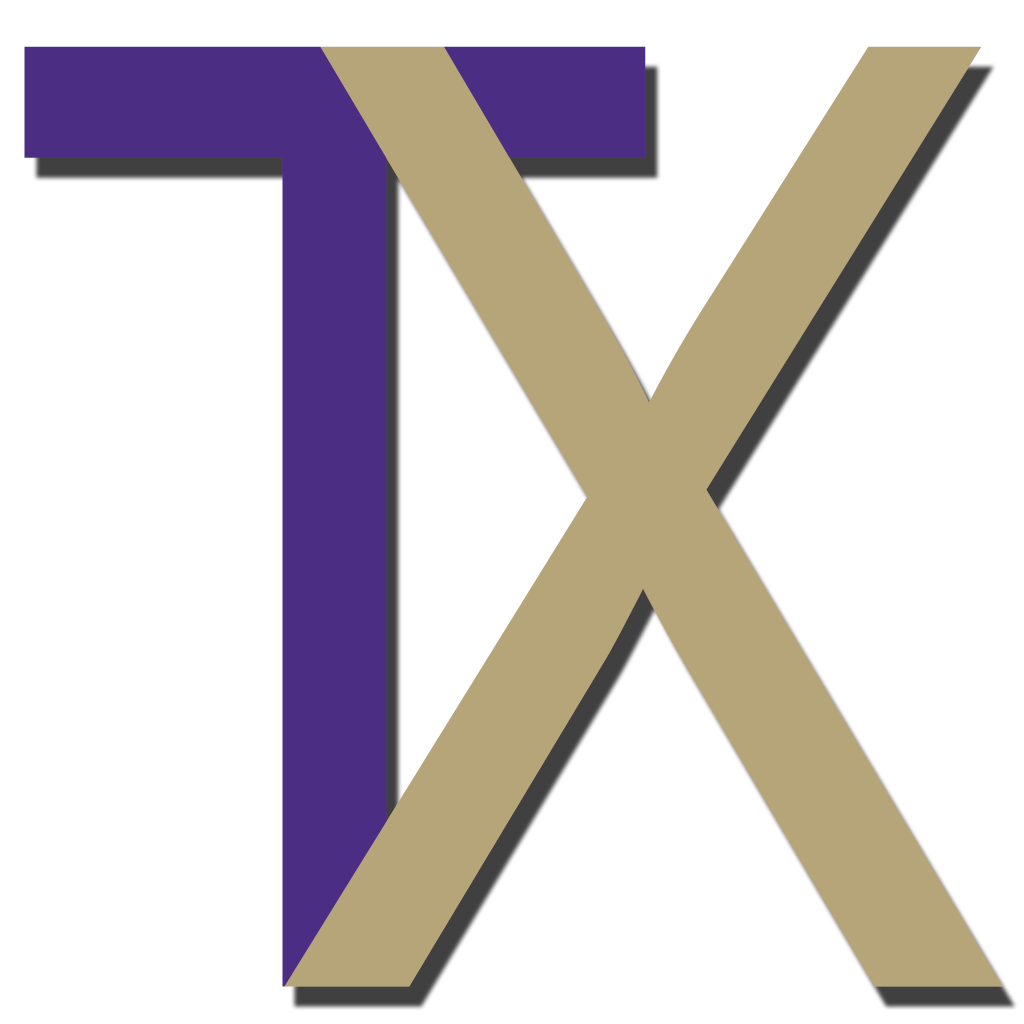
<style>
.page{position:relative;width:1024px;height:1024px;background:#ffffff}
.page>*{position:absolute;margin:0}
.t1{font:1312.5px "ArialMT";letter-spacing:-0.354em;color:#4b2e83;scale:0.83 1}
.t2{font:1312.5px "ArialMT";letter-spacing:-0.354em;color:#b7a57a;scale:0.83 1}
</style>
<div class="page">
<p class="t1" style="left:24px;top:46px;width:979px;height:941px">T<span class="t2">X</span></p>
</div>
